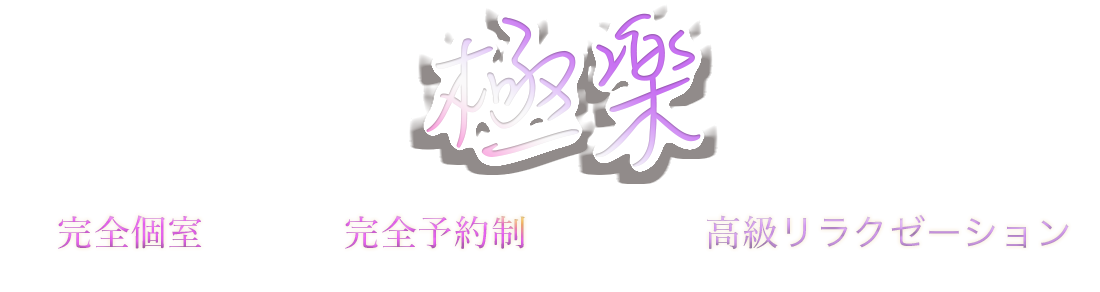
<style>
.page{position:relative;width:1100px;height:292px;background:#ffffff}
.page>*{position:absolute;margin:0}
.t1{font:181.9px "MLingWaiMedium-SC";letter-spacing:0.02em;text-transform:uppercase}
.t2{font:36px "YuMin-Medium";letter-spacing:0.02em;text-transform:uppercase}
.t3{font:36px "HiraKakuPro-W3";letter-spacing:0.02em;text-transform:uppercase}
</style>
<div class="page">
<p class="t1" style="left:426px;top:13px;width:275px;height:154px">極楽</p>
<p class="t2" style="left:58px;top:214px;width:1011px;height:35px">完全個室           完全予約制              高級<span class="t3">リラクゼーション</span></p>
</div>
